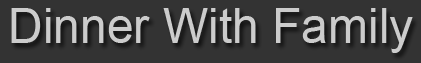
<style>
.page{position:relative;width:421px;height:63px;background:#333333}
.page>*{position:absolute;margin:0}
.t1{font:48px "ArialMT";color:#cccccc}
</style>
<div class="page">
<p class="t1" style="left:11px;top:8px;width:402px;height:45px">Dinner With Family</p>
</div>
